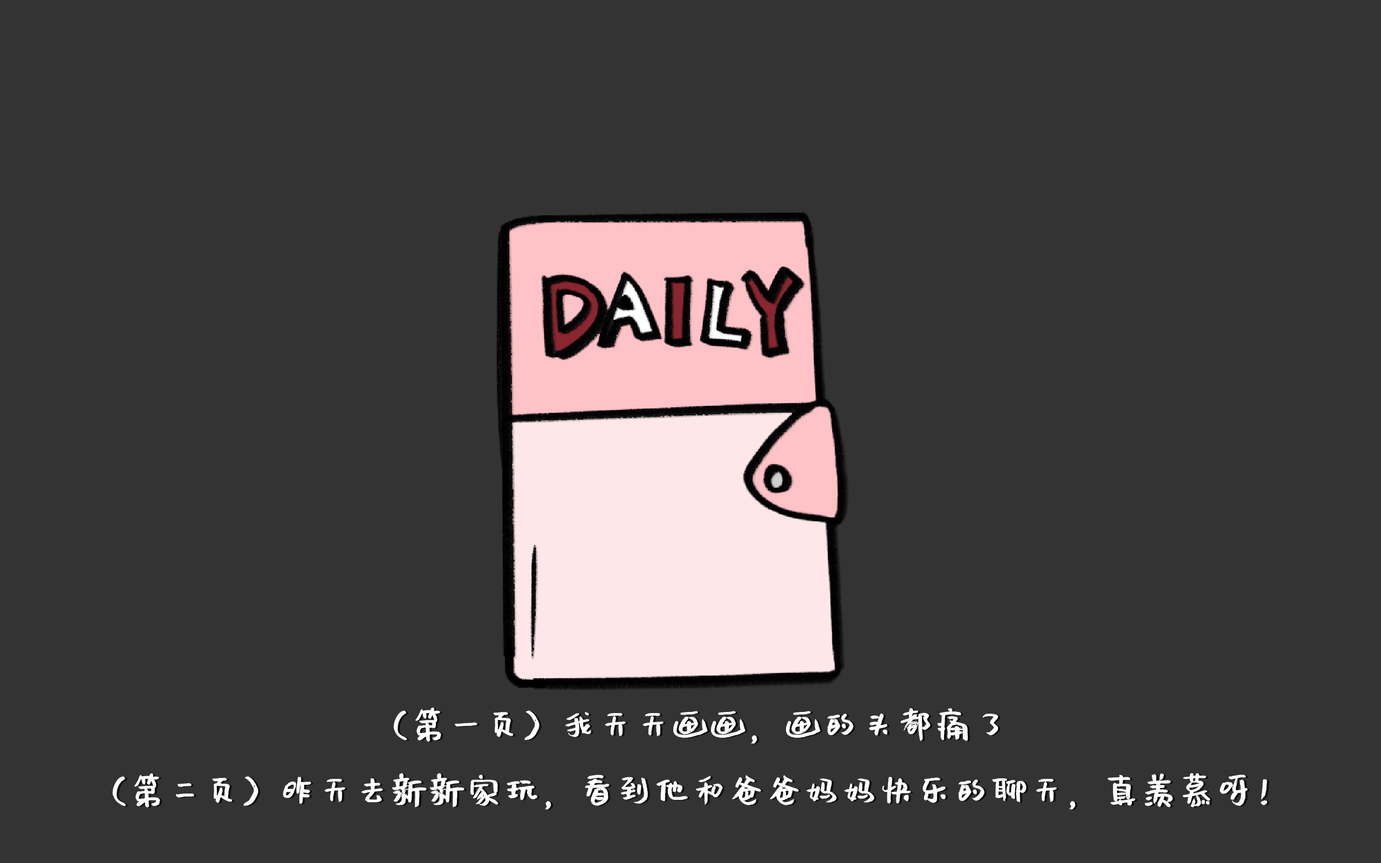
<style>
.page{position:relative;width:1381px;height:863px;background:#333333}
.page>*{position:absolute;margin:0}
.t1{font:37.5px "Muyao-Softbrush";color:#ffffff}
</style>
<div class="page">
<p class="t1" style="left:112px;top:707px;width:1155px;height:103px;text-align:center">（第一页）我天天画画，画的头都痛了<br>（第二页）昨天去新新家玩，看到他和爸爸妈妈快乐的聊天，真羡慕呀！</p>
</div>
